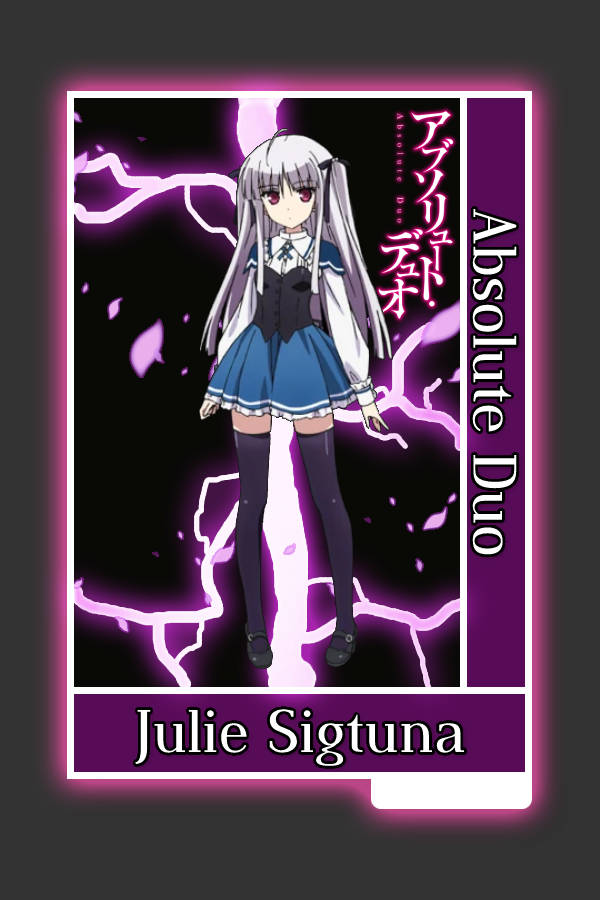
<style>
.page{position:relative;width:600px;height:900px;background:#333333}
.page>*{position:absolute;margin:0}
.t1{font:60px "DustismoRoman";color:#ffffff}
.t2{font:59px "DustismoRoman";color:#ffffff}
</style>
<div class="page">
<p class="t1" style="left:472px;top:208px;width:45px;height:347px;rotate:90deg">Absolute Duo</p>
<p class="t2" style="left:135px;top:709px;width:329px;height:57px">Julie Sigtuna</p>
</div>
